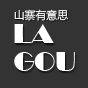
<style>
.page{position:relative;width:88px;height:88px;background:#333333}
.page>*{position:absolute;margin:0}
.t1{font:11px "MicrosoftYaHei";letter-spacing:-0.01em;color:#ffffff}
.t2{font:27.5px "Broadway";letter-spacing:-0.01em;color:#ffffff}
</style>
<div class="page">
<p class="t1" style="left:14px;top:9px;width:54px;height:12px">山寨有意思</p>
<p class="t2" style="left:14px;top:24px;width:40px;height:19px">LA</p>
<p class="t2" style="left:14px;top:52px;width:61px;height:19px">GOU</p>
</div>
